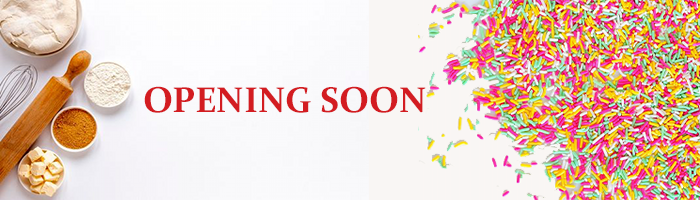
<style>
.page{position:relative;width:700px;height:200px}
.page>*{position:absolute;margin:0}
.t1{font:36px "Constantia-Bold";color:#d31d21}
</style>
<div class="page">
<p class="t1" style="left:144px;top:86px;width:282px;height:27px">OPENING SOON</p>
</div>
